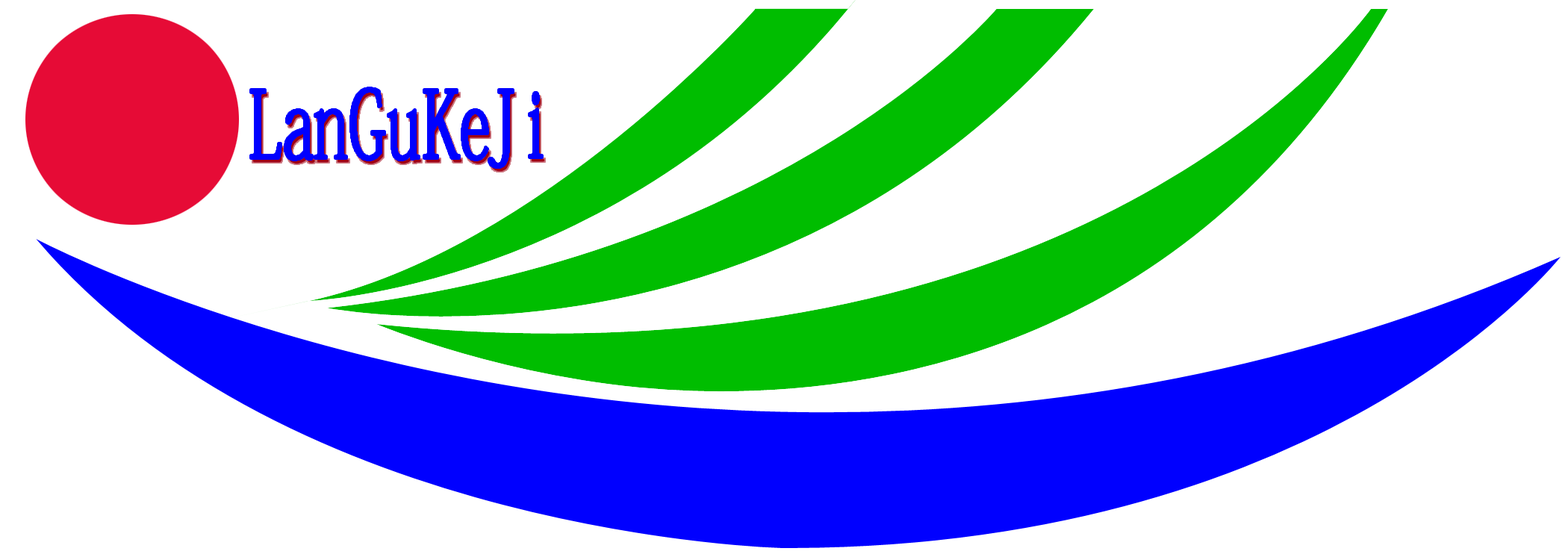
<style>
.page{position:relative;width:1568px;height:560px;background:#ffffff}
.page>*{position:absolute;margin:0}
.t1{font:93.3px "AdobeFangsongStd-Regular";color:#0000ff;scale:0.65 1}
</style>
<div class="page">
<p class="t1" style="left:251px;top:88px;width:262px;height:79px">LanGuKeJ</p>
<p class="t1" style="left:529px;top:93px;width:13px;height:65px">i</p>
</div>
